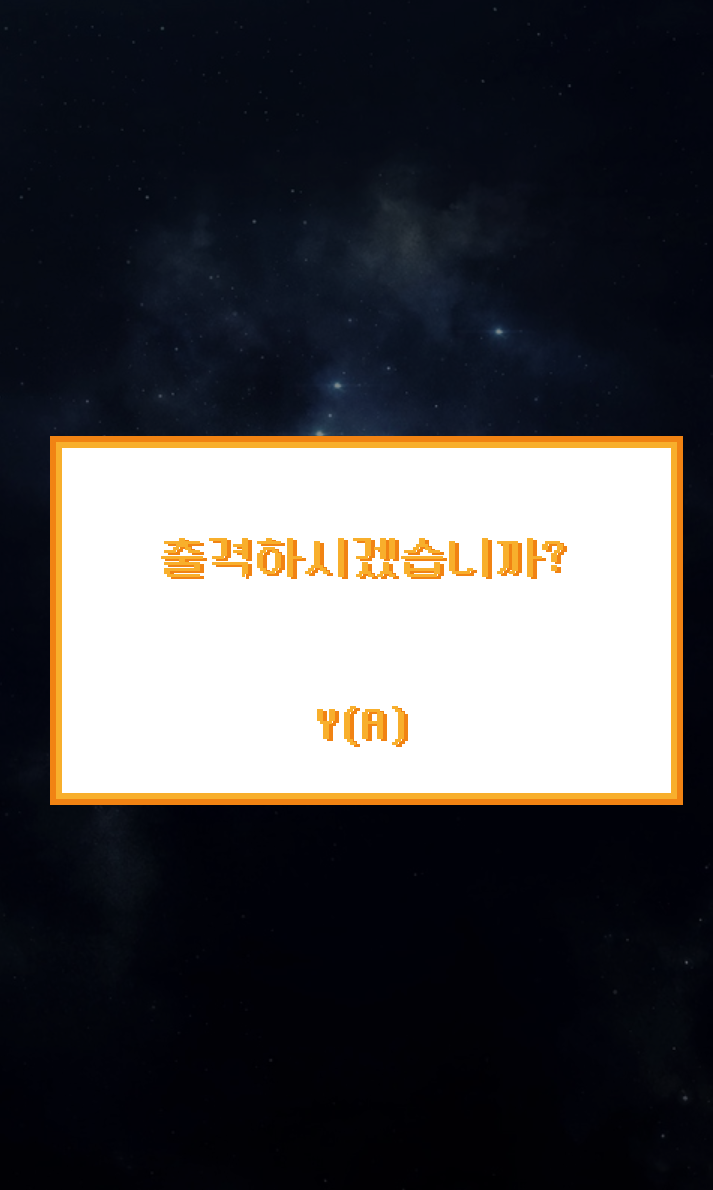
<style>
.page{position:relative;width:713px;height:1190px;background:#ffffff}
.page>*{position:absolute;margin:0}
.t1{font:48px "NeoDunggeunmo-Regular";color:#f8af2c}
.t2{font:48px "NeoDunggeunmo-Regular";color:#f18313}
</style>
<div class="page">
<p class="t1" style="left:161px;top:538px;width:402px;height:207px;text-align:center">출격하시겠습니까?<br><br>Y(A)</p>
<p class="t2" style="left:165px;top:540px;width:402px;height:207px;text-align:center">출격하시겠습니까?<br><br>Y(A)</p>
</div>
